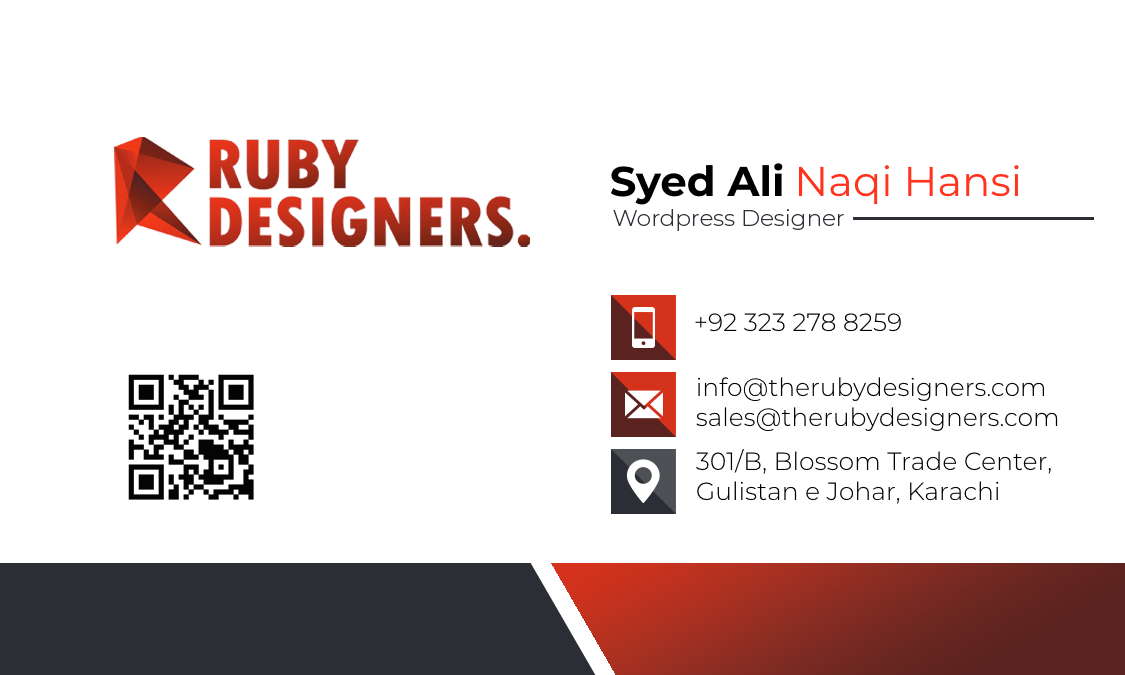
<style>
.page{position:relative;width:1125px;height:675px;background:#ffffff}
.page>*{position:absolute;margin:0}
.t1{font:41.7px "Montserrat-Regular";color:#ff331e}
.t2{font:41.7px "Montserrat-Bold";color:#000000}
.t3{font:22.9px "Montserrat-Light";color:#2b2e34}
.t4{font:25px "Montserrat-Light";color:#000000}
.t5{font:25.1px "Montserrat-Light";color:#000000}
</style>
<div class="page">
<p class="t1" style="left:610px;top:163px;width:409px;height:42px"><span class="t2">Syed Ali </span>Naqi Hansi</p>
<p class="t3" style="left:613px;top:209px;width:231px;height:22px">Wordpress Designer</p>
<p class="t4" style="left:695px;top:313px;width:206px;height:19px">+92 323 278 8259</p>
<p class="t5" style="left:696px;top:377px;width:362px;height:54px">info@therubydesigners.com<br>sales@therubydesigners.com</p>
<p class="t4" style="left:696px;top:448px;width:355px;height:56px">301/B, Blossom Trade Center,<br>Gulistan e Johar, Karachi</p>
</div>
